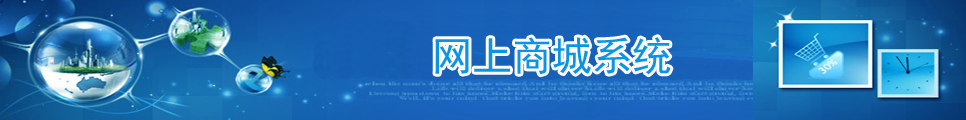
<style>
.page{position:relative;width:966px;height:120px}
.page>*{position:absolute;margin:0}
.t1{font:40px "SimHei";color:#0995e6}
</style>
<div class="page">
<p class="t1" style="left:435px;top:37px;width:236px;height:38px">网上商城系统</p>
</div>
